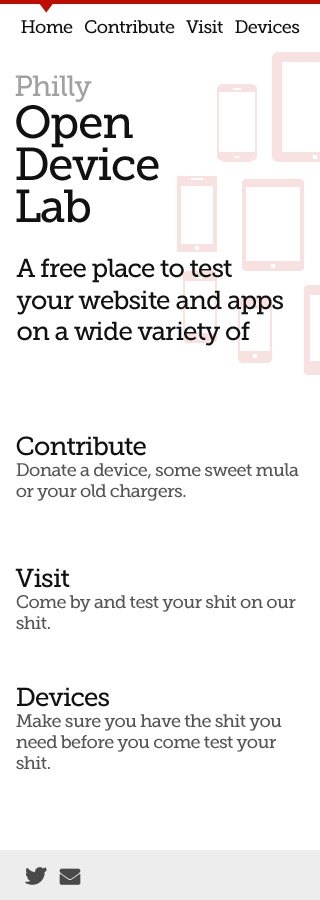
<style>
.page{position:relative;width:320px;height:900px;background:#ffffff}
.page>*{position:absolute;margin:0}
.t1{font:18px "MuseoSlab-500";letter-spacing:-0.035em;color:#111111}
.t2{font:46px/42px "MuseoSlab-500";letter-spacing:-0.035em;color:#111111}
.t3{font:29px/42px "MuseoSlab-500";letter-spacing:-0.035em;color:#a1a1a1}
.t4{font:26px "MuseoSlab-500";letter-spacing:-0.035em;color:#111111}
.t5{font:18px/21px "MuseoSlab-500";letter-spacing:-0.035em;color:#555555}
.t6{font:26px/27px "MuseoSlab-500";letter-spacing:-0.035em;color:#111111}
</style>
<div class="page">
<p class="t1" style="left:21px;top:20px;width:279px;height:14px">Home   Contribute   Visit   Devices</p>
<p class="t2" style="left:15px;top:75px;width:144px;height:148px"><span class="t3">Philly<br></span>Open<br>Device<br>Lab</p>
<p class="t4" style="left:16px;top:258px;width:267px;height:88px">A free place to test your website and apps on a wide variety of devices.</p>
<p class="t5" style="left:16px;top:436px;width:283px;height:65px"><span class="t6">Contribute<br></span>Donate a device, some sweet mula or your old chargers.</p>
<p class="t5" style="left:15px;top:568px;width:281px;height:62px"><span class="t6">Visit<br></span>Come by and test your shit on our shit.</p>
<p class="t5" style="left:16px;top:687px;width:266px;height:83px"><span class="t6">Devices<br></span>Make sure you have the shit you need before you come test your shit.</p>
</div>
